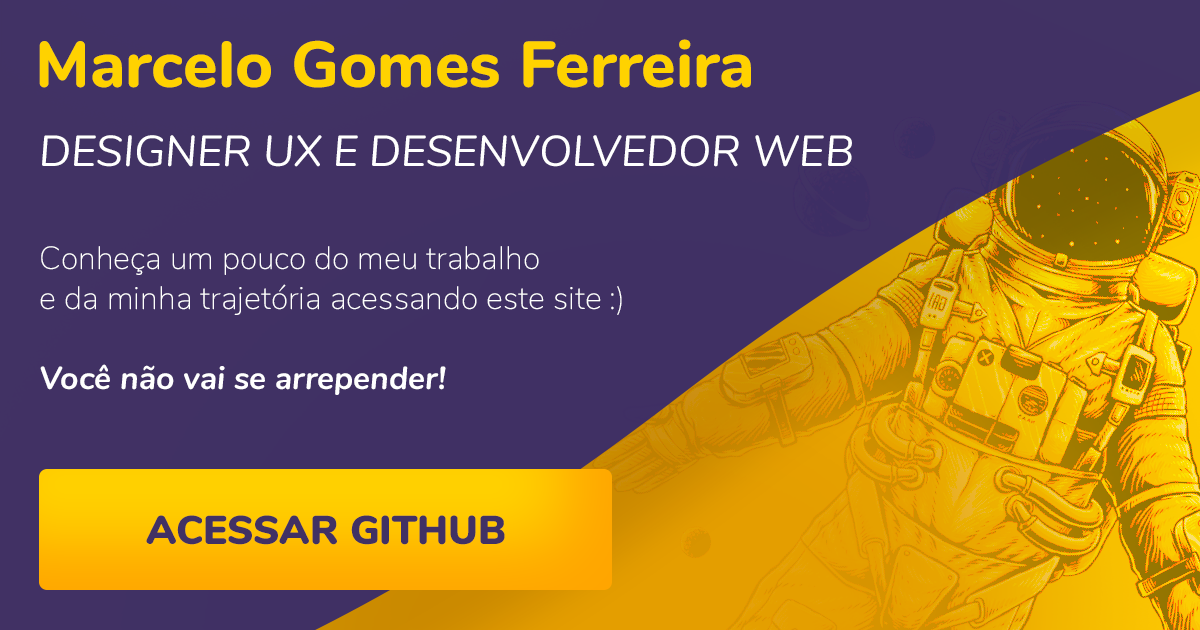
<style>
.page{position:relative;width:1200px;height:630px;background:#413164}
.page>*{position:absolute;margin:0}
.t1{font:64.9px "Nunito-ExtraBold";color:#ffd200}
.t2{font:43.2px "Nunito-Italic";color:#ffffff;text-transform:uppercase}
.t3{font:32px/40px "Nunito-ExtraLight";color:#ffffff}
.t4{font:32px/40px "Nunito-BoldItalic";color:#ffffff}
.t5{font:40px "Nunito-Black";color:#413164;text-transform:uppercase}
</style>
<div class="page">
<p class="t1" style="left:39px;top:39px;width:712px;height:49px">Marcelo Gomes Ferreira</p>
<p class="t2" style="left:42px;top:135px;width:810px;height:32px">Designer UX e Desenvolvedor Web</p>
<p class="t3" style="left:40px;top:246px;width:582px;height:149px">Conheça um pouco do meu trabalho<br>e da minha trajetória acessando este site :)<br><br><span class="t4">Você não vai se arrepender!</span></p>
<p class="t5" style="left:146px;top:515px;width:359px;height:30px">Acessar Github</p>
</div>
